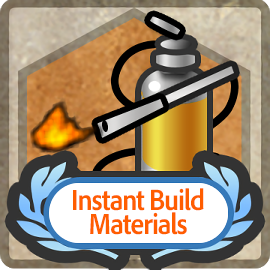
<style>
.page{position:relative;width:270px;height:270px}
.page>*{position:absolute;margin:0}
.t1{font:30px/24px "AdobeClean-Bold";letter-spacing:-0.04em;color:#ff5d00;scale:0.9 1}
</style>
<div class="page">
<p class="t1" style="left:73px;top:188px;width:131px;height:47px;text-align:center">Instant Build<br>Materials</p>
</div>
